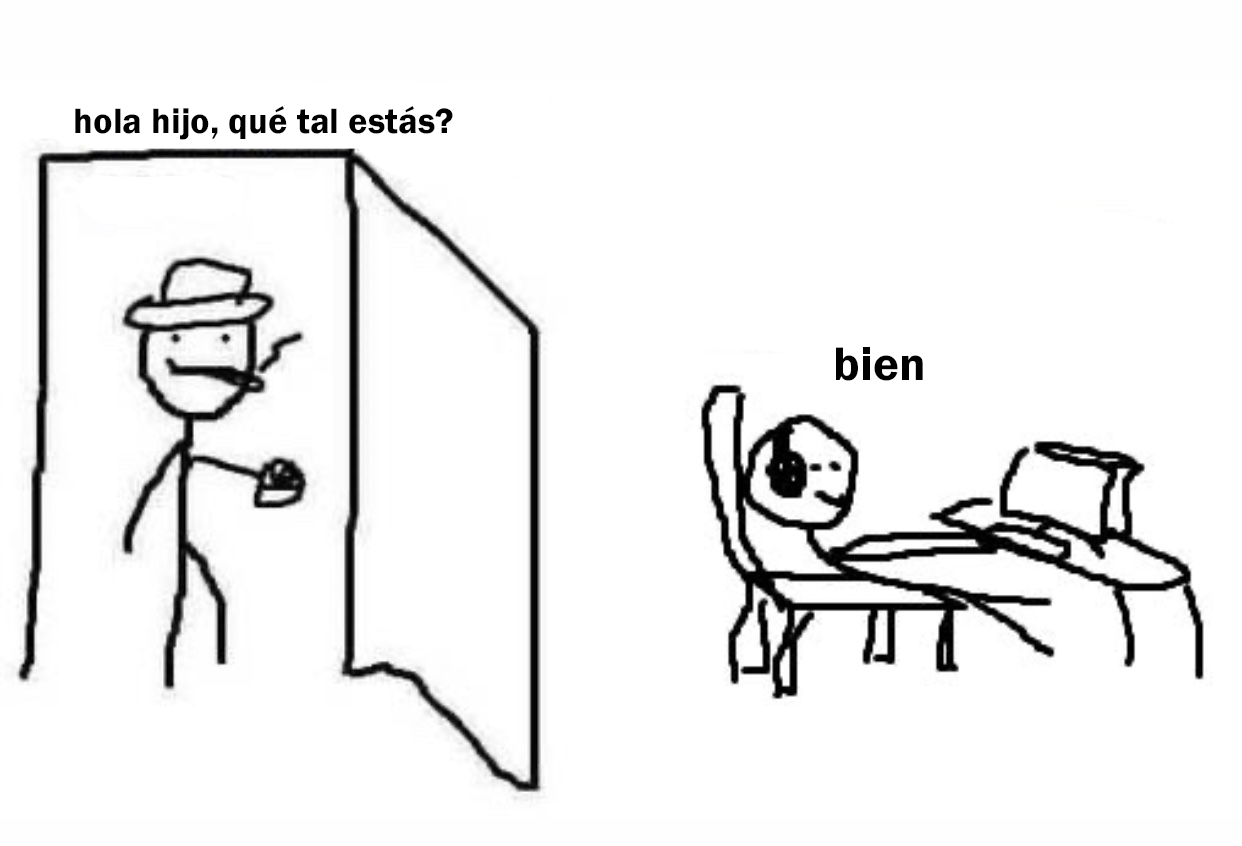
<style>
.page{position:relative;width:1242px;height:846px;background:#ffffff}
.page>*{position:absolute;margin:0}
.t1{font:36.4px "FranklinGothic-Demi";color:#000000}
.t2{font:48.8px "FranklinGothic-Demi";color:#000000}
</style>
<div class="page">
<p class="t1" style="left:75px;top:106px;width:378px;height:34px">hola hijo, qué tal estás?</p>
<p class="t2" style="left:836px;top:347px;width:87px;height:34px">bien</p>
</div>
